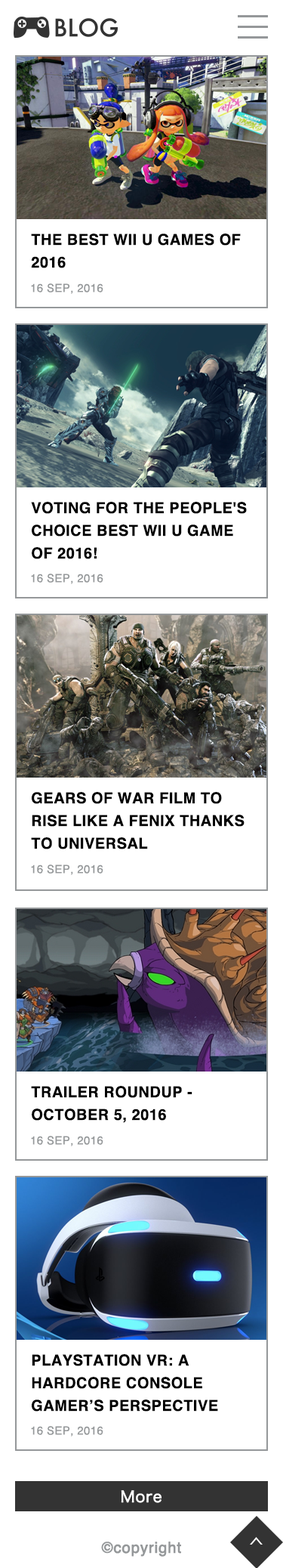
<style>
.page{position:relative;width:283px;height:1568px;background:#ffffff}
.page>*{position:absolute;margin:0}
.t1{font:15.1px/22.7px "Helvetica-Bold";letter-spacing:0.025em;color:#000000;text-transform:uppercase}
.t2{font:11.3px "Helvetica";letter-spacing:0.025em;color:#95989a;text-transform:uppercase}
.t3{font:15.1px "HiraKakuProN-W3";letter-spacing:0.025em;color:#ffffff;font-weight:bold}
.t4{font:15.1px "Helvetica";letter-spacing:0.025em;color:#95989a;font-weight:bold}
</style>
<div class="page">
<p class="t1" style="left:31px;top:233px;width:210px;height:35px">The Best Wii U Games of <br>2016</p>
<p class="t2" style="left:31px;top:283px;width:73px;height:11px">16 Sep, 2016</p>
<p class="t1" style="left:31px;top:502px;width:216px;height:57px">VOTING FOR THE PEOPLE'S <br>CHOICE BEST WII U GAME <br>OF 2016!</p>
<p class="t2" style="left:31px;top:574px;width:73px;height:10px">16 Sep, 2016</p>
<p class="t1" style="left:31px;top:792px;width:214px;height:57px">Gears of War film to<br>rise like a Fenix thanks<br>to Universal</p>
<p class="t2" style="left:31px;top:864px;width:73px;height:11px">16 Sep, 2016</p>
<p class="t1" style="left:31px;top:1086px;width:162px;height:37px">Trailer Roundup - <br>October 5, 2016</p>
<p class="t2" style="left:31px;top:1136px;width:73px;height:10px">16 Sep, 2016</p>
<p class="t1" style="left:32px;top:1354px;width:186px;height:58px">PlayStation VR: A <br>Hardcore Console <br>Gamer’s Perspective</p>
<p class="t2" style="left:31px;top:1426px;width:73px;height:11px">16 Sep, 2016</p>
<p class="t3" style="left:121px;top:1490px;width:41px;height:13px">More</p>
<p class="t4" style="left:101px;top:1542px;width:80px;height:15px">©copyright</p>
</div>
